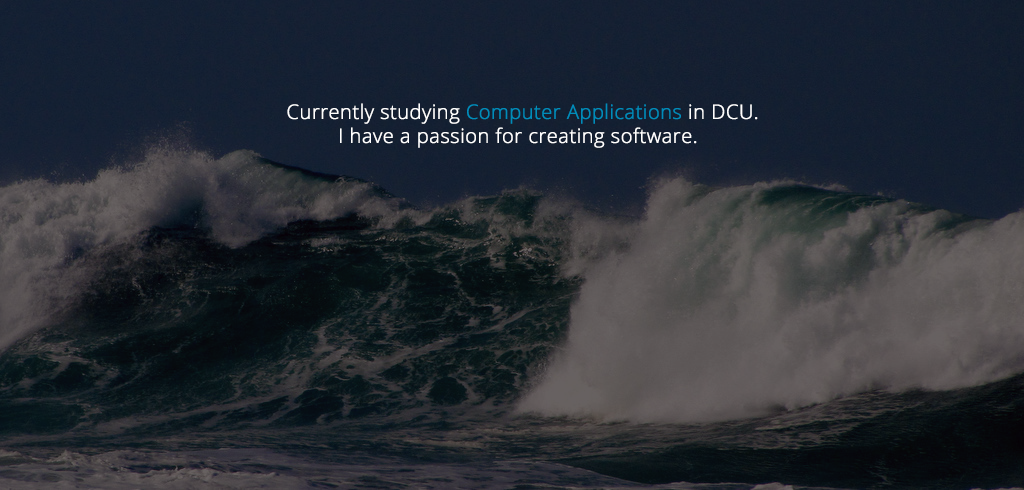
<style>
.page{position:relative;width:1024px;height:490px}
.page>*{position:absolute;margin:0}
.t1{font:20px "OpenSans-Light";color:#ffffff;font-weight:bold}
.t2{font:20px "OpenSans-Light";color:#008cba;font-weight:bold}
</style>
<div class="page">
<p class="t1" style="left:287px;top:103px;width:471px;height:45px">Currently studying <span class="t2">Computer Applications</span> in DCU.<br>         I have a passion for creating software.</p>
</div>
